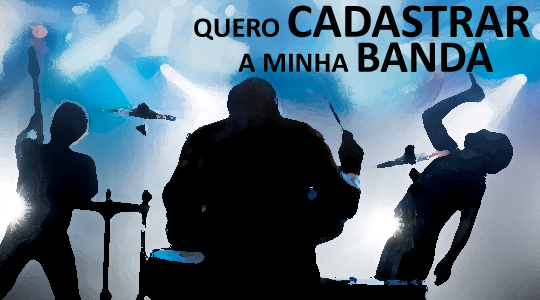
<style>
.page{position:relative;width:540px;height:300px;background:#000000}
.page>*{position:absolute;margin:0}
.t1{font:48.5px/35px "Calibri-Bold";color:#000000}
.t2{font:28.5px/35px "Calibri-Bold";color:#000000}
.t3{font:45.6px/35px "Calibri-Bold";color:#000000}
</style>
<div class="page">
<p class="t1" style="left:194px;top:5px;width:336px;height:67px"><span class="t2">QUERO </span>CADASTRAR<br><span class="t2">       A MINHA </span><span class="t3">BANDA</span></p>
</div>
